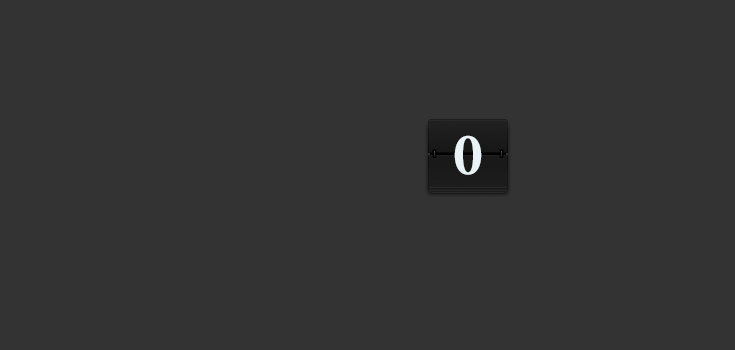
<style>
.page{position:relative;width:735px;height:350px;background:#333333}
.page>*{position:absolute;margin:0}
.t1{font:60px "MinionPro-Bold";color:#eaf4f7}
</style>
<div class="page">
<p class="t1" style="left:454px;top:135px;width:28px;height:40px">0</p>
</div>
